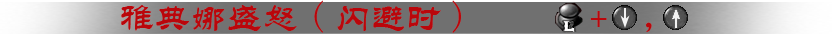
<style>
.page{position:relative;width:832px;height:34px;background:#707070}
.page>*{position:absolute;margin:0}
.t1{font:36px "STLiti";color:#ba060b}
.t2{font:36px "FangSong";color:#ba060b}
</style>
<div class="page">
<p class="t1" style="left:121px;top:0px;width:531px;height:33px">雅典娜盛怒<span class="t2">(</span>闪避时<span class="t2">)       </span>+<span class="t2">  ，</span></p>
</div>
